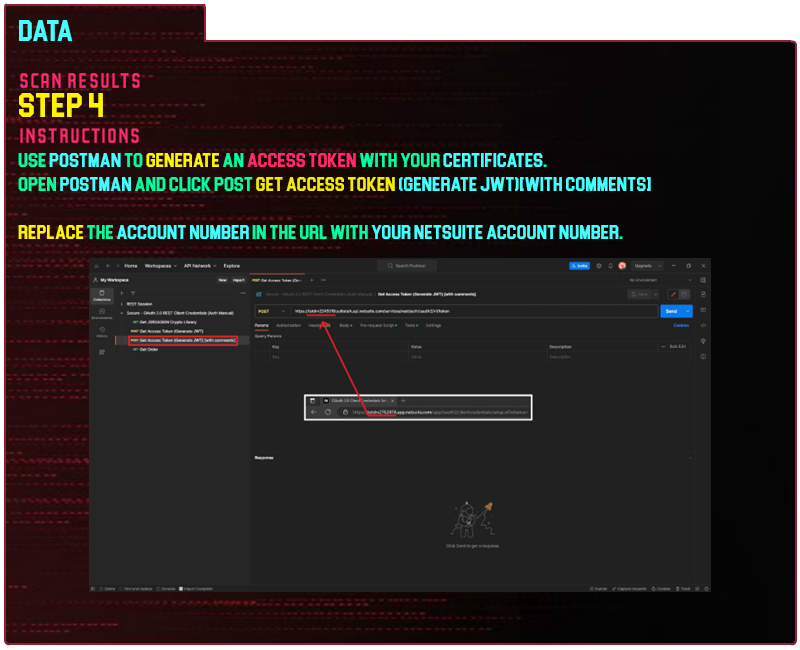
<style>
.page{position:relative;width:800px;height:650px;background:#212121}
.page>*{position:absolute;margin:0}
.t1{font:30px "Blockletter";color:#43ffff}
.t2{font:35px "Party-Lights-[WLM]-Flat";color:#ff296d}
.t3{font:35px "Blockletter";color:#fdf500}
.t4{font:20px "Blockletter";color:#43ffff}
.t5{font:20px "Blockletter";color:#00ff9f}
.t6{font:20px "Blockletter";color:#fdf500}
.t7{font:20px "Blockletter";color:#ff296d}
.t8{font:20px "Blockletter";color:#f3eb00}
</style>
<div class="page">
<p class="t1" style="left:19px;top:20px;width:54px;height:21px">Data</p>
<p class="t2" style="left:20px;top:73px;width:120px;height:15px">Scan REsults</p>
<p class="t3" style="left:19px;top:93px;width:84px;height:24px">step 4</p>
<p class="t2" style="left:20px;top:128px;width:119px;height:15px">instructions</p>
<p class="t4" style="left:18px;top:153px;width:633px;height:86px"><span class="t5">use </span>postman<span class="t5"> to </span><span class="t6">generate </span><span class="t5">an </span><span class="t7">access token</span><span class="t5"> with your </span>certificates<span class="t5">.<br>open </span>postman <span class="t5">and click post </span><span class="t8">get access token </span>(generate jwt)[with comments]<br><br><span class="t6">replace</span><span class="t5"> the </span>account number<span class="t5"> in the url with </span>your netsuite account number<span class="t5">.</span></p>
</div>
